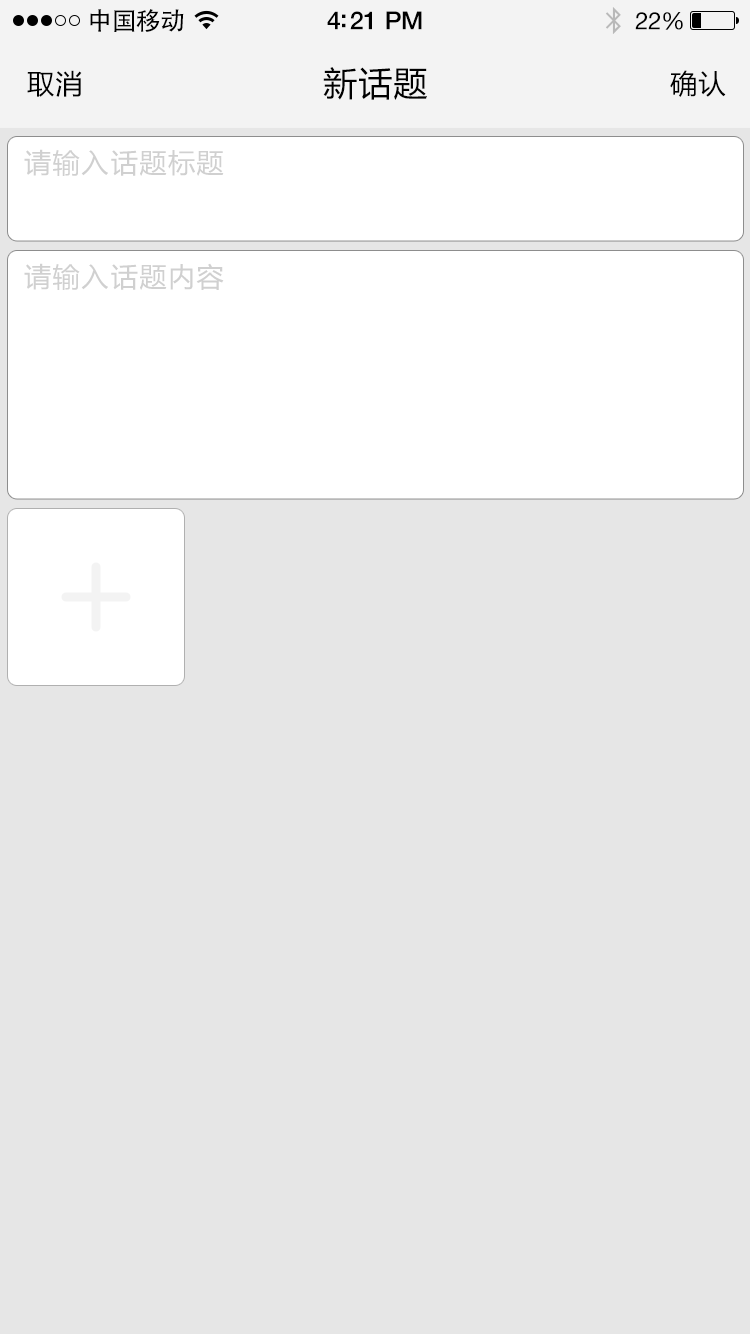
<style>
.page{position:relative;width:750px;height:1334px;background:#e6e6e6}
.page>*{position:absolute;margin:0}
.t1{font:25px "AdobeHeitiStd-Regular";letter-spacing:-0.025em;color:#000000}
.t2{font:25px "HelveticaNeue-Medium";letter-spacing:-0.02em;color:#000000}
.t3{font:24px "HelveticaNeue";letter-spacing:-0.02em;color:#000000}
.t4{font:27px "MicrosoftYaHei";letter-spacing:0.05em;color:#000000}
.t5{font:34px "MicrosoftYaHei";letter-spacing:0.03em;color:#000000}
.t6{font:27px "MicrosoftYaHei";letter-spacing:0.05em;color:#d0d0d0}
</style>
<div class="page">
<p class="t1" style="left:90px;top:9px;width:94px;height:23px">中国移动</p>
<p class="t2" style="left:327px;top:11px;width:95px;height:19px">4:21 PM</p>
<p class="t3" style="left:635px;top:12px;width:48px;height:18px">22%</p>
<p class="t4" style="left:27px;top:70px;width:55px;height:27px">取消</p>
<p class="t5" style="left:323px;top:67px;width:104px;height:33px">新话题</p>
<p class="t4" style="left:670px;top:70px;width:56px;height:27px">确认</p>
<p class="t6" style="left:24px;top:149px;width:200px;height:27px">请输入话题标题</p>
<p class="t6" style="left:24px;top:263px;width:200px;height:27px">请输入话题内容</p>
</div>
